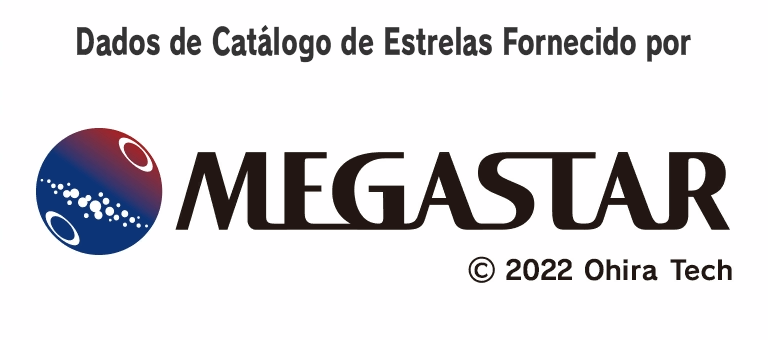
<style>
.page{position:relative;width:768px;height:340px;background:#fffeff}
.page>*{position:absolute;margin:0}
.t1{font:36px "RodinPro-EB";letter-spacing:-0.003em;color:#343334;scale:0.72 1}
</style>
<div class="page">
<p class="t1" style="left:77px;top:25px;width:614px;height:38px">Dados de Catálogo de Estrelas Fornecido por</p>
</div>
